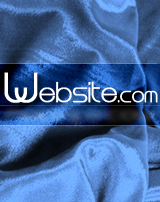
<style>
.page{position:relative;width:160px;height:202px}
.page>*{position:absolute;margin:0}
.t1{font:23.8px "Steiner";color:#ffffff;font-weight:bold}
.t2{font:48px "Steiner";color:#ffffff;font-weight:bold}
.t3{font:18px "Steiner";color:#ffffff;font-weight:bold}
</style>
<div class="page">
<p class="t1" style="left:4px;top:72px;width:154px;height:31px"><span class="t2">w</span>ebsite<span class="t3">.com</span></p>
</div>
